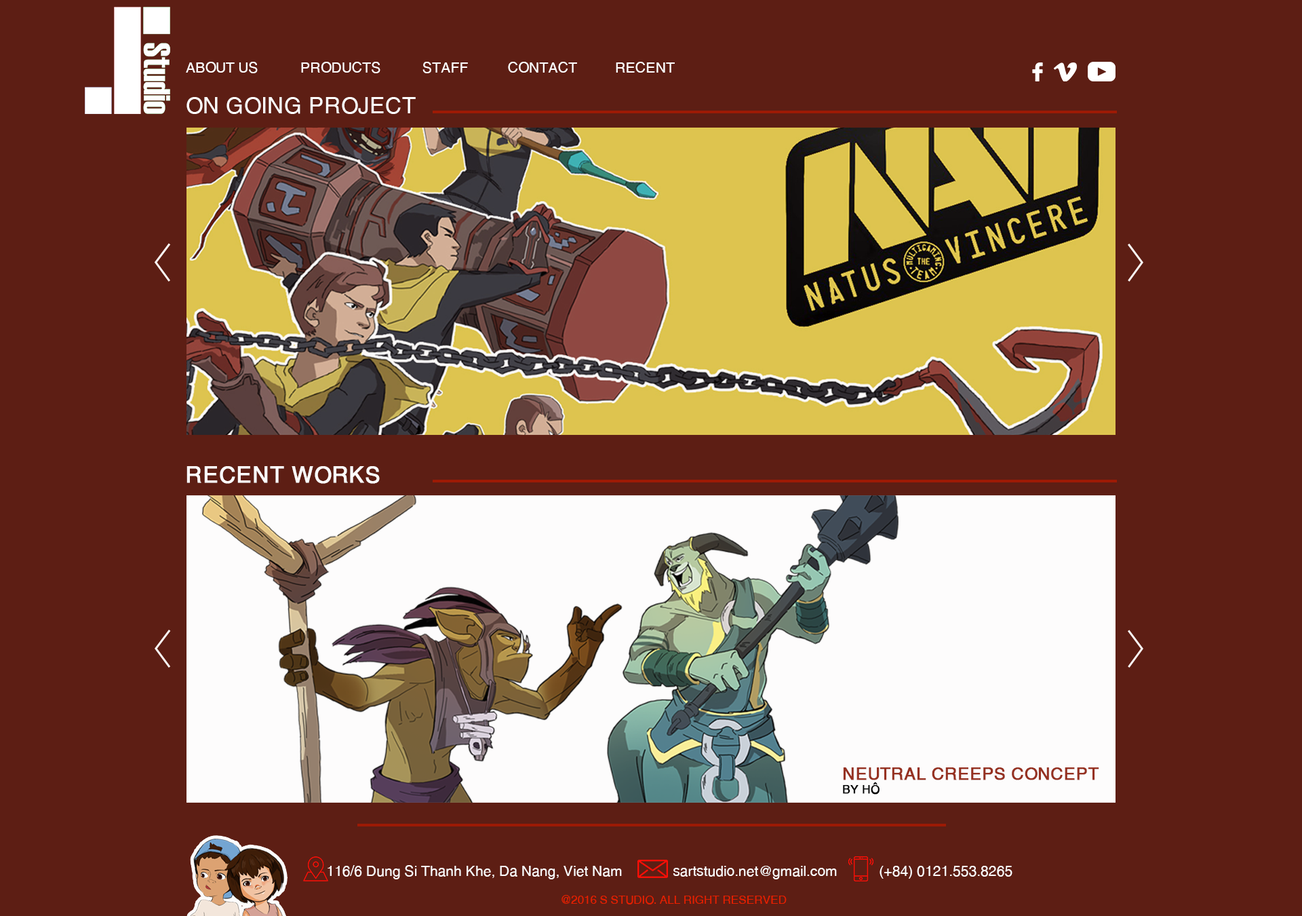
<style>
.page{position:relative;width:1302px;height:916px;background:#5d1e14}
.page>*{position:absolute;margin:0}
.t1{font:14.1px "SVN-Helves";letter-spacing:-0.02em;color:#ffffff;text-transform:uppercase}
.t2{font:22.6px "SVN-Helves";letter-spacing:-0.02em;color:#ffffff;text-transform:uppercase}
.t3{font:22.6px "SVN-Helves";letter-spacing:-0.02em;color:#fdfcfc;text-transform:uppercase;font-weight:bold}
.t4{font:16.9px "SVN-Helves";letter-spacing:-0.02em;color:#963121;text-transform:uppercase;font-weight:bold}
.t5{font:11.3px "SVN-Helves";letter-spacing:-0.02em;color:#000000;text-transform:uppercase;font-weight:bold}
.t6{font:14.1px "SVN-Helves";letter-spacing:-0.02em;color:#fdfcfc}
.t7{font:11.3px "SVN-Helves";letter-spacing:-0.02em;color:#e62001;text-transform:uppercase}
</style>
<div class="page">
<p class="t1" style="left:186px;top:62px;width:72px;height:11px">about us</p>
<p class="t1" style="left:301px;top:62px;width:80px;height:11px">Products</p>
<p class="t1" style="left:423px;top:62px;width:45px;height:11px">Staff</p>
<p class="t1" style="left:508px;top:62px;width:69px;height:11px">Contact</p>
<p class="t1" style="left:616px;top:62px;width:59px;height:11px">recent</p>
<p class="t2" style="left:187px;top:97px;width:229px;height:17px">ON GOING PROJECT</p>
<p class="t3" style="left:187px;top:466px;width:193px;height:18px">rECENT wORKS</p>
<p class="t4" style="left:843px;top:767px;width:256px;height:27px">Neutral creeps concept<br><span class="t5">By Hô</span></p>
<p class="t6" style="left:328px;top:865px;width:294px;height:14px">116/6 Dung Si Thanh Khe, Da Nang, Viet Nam</p>
<p class="t6" style="left:673px;top:865px;width:164px;height:14px">sartstudio.net@ gmail.com</p>
<p class="t6" style="left:880px;top:865px;width:133px;height:13px">(+84) 0121.553.8265</p>
<p class="t7" style="left:562px;top:895px;width:225px;height:9px">@ 2016 S studio. all right reserved</p>
</div>
